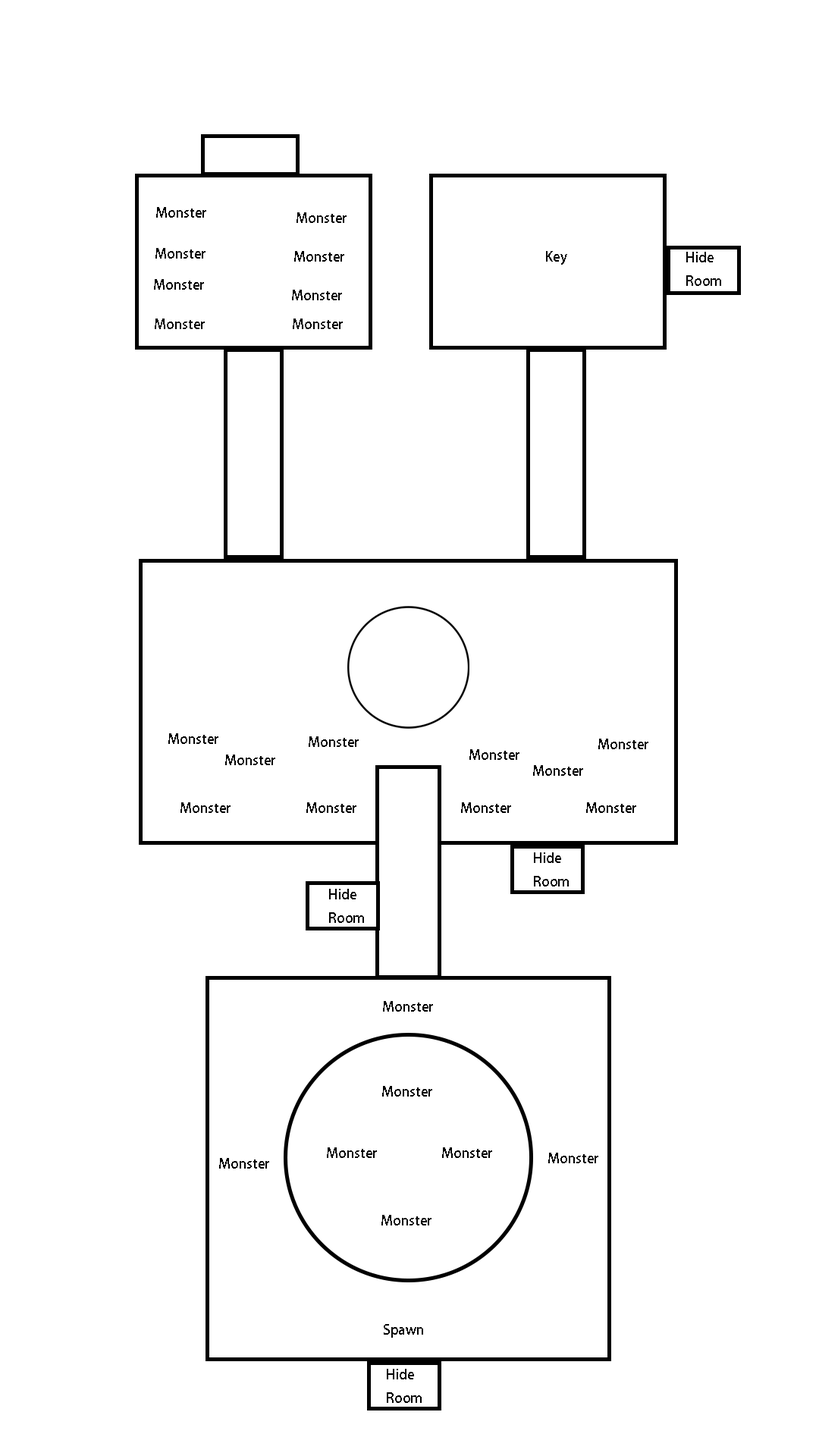
<style>
.page{position:relative;width:819px;height:1456px;background:#ffffff}
.page>*{position:absolute;margin:0}
.t1{font:13.7px "AdobeHeitiStd-Regular";color:#000000}
</style>
<div class="page">
<p class="t1" style="left:156px;top:207px;width:50px;height:11px">Monster</p>
<p class="t1" style="left:297px;top:212px;width:50px;height:11px">Monster</p>
<p class="t1" style="left:155px;top:248px;width:51px;height:11px">Monster</p>
<p class="t1" style="left:294px;top:251px;width:50px;height:11px">Monster</p>
<p class="t1" style="left:546px;top:251px;width:21px;height:14px">Key</p>
<p class="t1" style="left:686px;top:252px;width:35px;height:34px">Hide<br>Room</p>
<p class="t1" style="left:154px;top:279px;width:50px;height:11px">Monster</p>
<p class="t1" style="left:292px;top:290px;width:50px;height:10px">Monster</p>
<p class="t1" style="left:155px;top:318px;width:50px;height:11px">Monster</p>
<p class="t1" style="left:293px;top:318px;width:50px;height:11px">Monster</p>
<p class="t1" style="left:168px;top:733px;width:50px;height:11px">Monster</p>
<p class="t1" style="left:309px;top:736px;width:50px;height:11px">Monster</p>
<p class="t1" style="left:469px;top:749px;width:50px;height:11px">Monster</p>
<p class="t1" style="left:598px;top:739px;width:50px;height:10px">Monster</p>
<p class="t1" style="left:225px;top:755px;width:50px;height:10px">Monster</p>
<p class="t1" style="left:533px;top:765px;width:50px;height:11px">Monster</p>
<p class="t1" style="left:180px;top:802px;width:51px;height:11px">Monster</p>
<p class="t1" style="left:306px;top:802px;width:50px;height:11px">Monster</p>
<p class="t1" style="left:461px;top:802px;width:50px;height:11px">Monster</p>
<p class="t1" style="left:586px;top:802px;width:50px;height:11px">Monster</p>
<p class="t1" style="left:534px;top:852px;width:35px;height:34px">Hide<br>Room</p>
<p class="t1" style="left:329px;top:889px;width:35px;height:34px">Hide<br>Room</p>
<p class="t1" style="left:383px;top:1001px;width:50px;height:11px">Monster</p>
<p class="t1" style="left:382px;top:1086px;width:50px;height:11px">Monster</p>
<p class="t1" style="left:219px;top:1158px;width:50px;height:11px">Monster</p>
<p class="t1" style="left:327px;top:1147px;width:50px;height:11px">Monster</p>
<p class="t1" style="left:442px;top:1147px;width:50px;height:11px">Monster</p>
<p class="t1" style="left:548px;top:1153px;width:50px;height:10px">Monster</p>
<p class="t1" style="left:381px;top:1215px;width:50px;height:10px">Monster</p>
<p class="t1" style="left:384px;top:1324px;width:39px;height:14px">Spawn</p>
<p class="t1" style="left:387px;top:1369px;width:35px;height:34px">Hide<br>Room</p>
</div>
